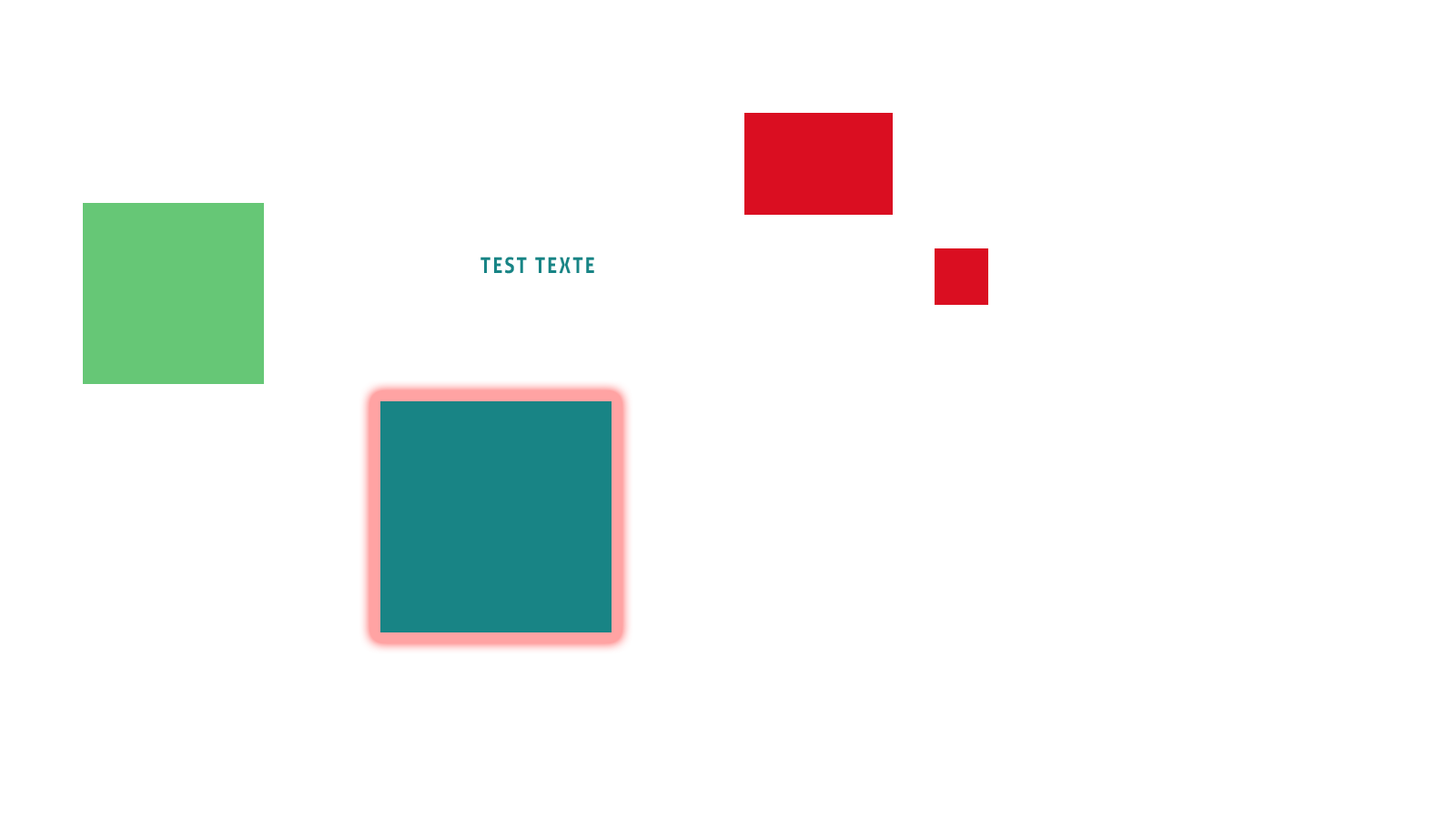
<style>
.page{position:relative;width:1456px;height:819px;background:#ffffff}
.page>*{position:absolute;margin:0}
.t1{font:21.8px "Aller-Bold";letter-spacing:0.1em;color:#188485;text-transform:uppercase;scale:0.85 1}
</style>
<div class="page">
<p class="t1" style="left:480px;top:257px;width:114px;height:17px">test texte</p>
</div>
